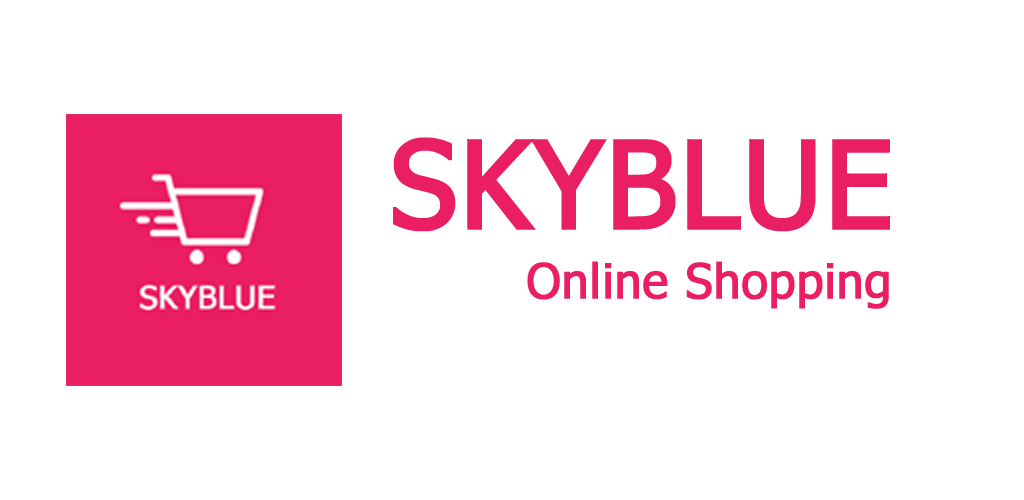
<style>
.page{position:relative;width:1024px;height:500px;background:#ffffff}
.page>*{position:absolute;margin:0}
.t1{font:120px "Tahoma";color:#e91e63;font-weight:bold}
.t2{font:48px "Tahoma";color:#e91e63;font-weight:bold}
</style>
<div class="page">
<p class="t1" style="left:393px;top:137px;width:498px;height:95px">SKYBLUE</p>
<p class="t2" style="left:527px;top:261px;width:362px;height:48px">Online Shopping</p>
</div>
